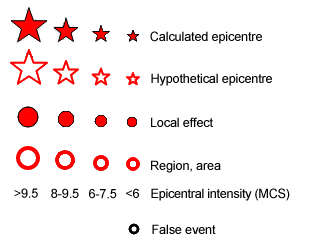
<style>
.page{position:relative;width:310px;height:250px;background:#ffffff}
.page>*{position:absolute;margin:0}
.t1{font:12.8px "ArialMT";letter-spacing:-0.015em;color:#000100}
.t2{font:12.8px "ArialMT";letter-spacing:-0.025em;color:#000100}
</style>
<div class="page">
<p class="t1" style="left:150px;top:31px;width:112px;height:13px">Calculated epicentre</p>
<p class="t1" style="left:151px;top:73px;width:121px;height:13px">Hypothetical epicentre</p>
<p class="t1" style="left:151px;top:117px;width:62px;height:10px">Local effect</p>
<p class="t1" style="left:151px;top:160px;width:70px;height:13px">Region, area</p>
<p class="t1" style="left:14px;top:188px;width:24px;height:10px">&gt;9.5</p>
<p class="t1" style="left:51px;top:188px;width:28px;height:10px">8-9.5</p>
<p class="t1" style="left:89px;top:189px;width:28px;height:10px">6-7.5</p>
<p class="t1" style="left:126px;top:188px;width:13px;height:10px">&lt;6</p>
<p class="t2" style="left:151px;top:188px;width:139px;height:13px">Epicentral intensity (MCS)</p>
<p class="t1" style="left:152px;top:224px;width:64px;height:10px">False event</p>
</div>
